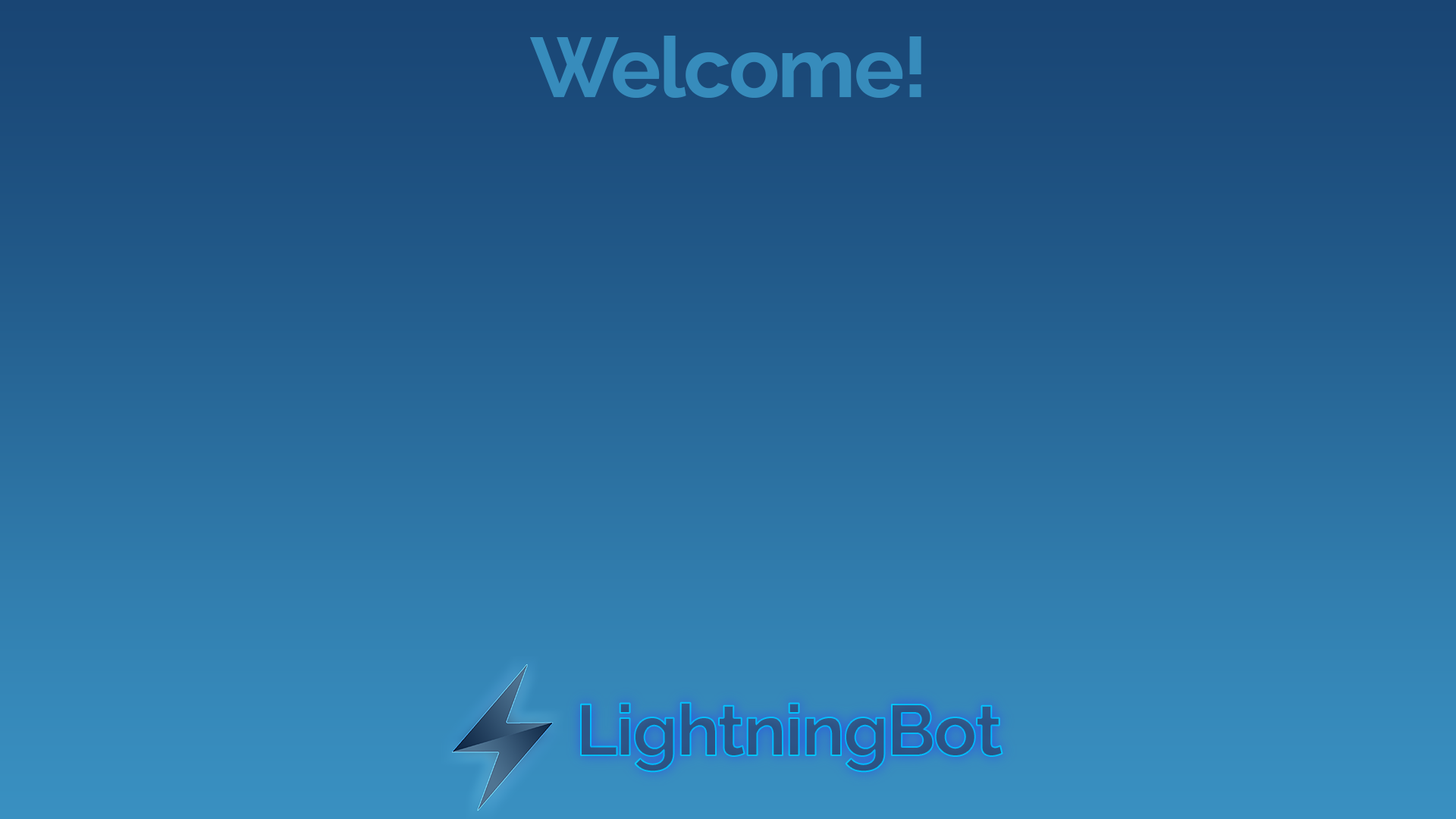
<style>
.page{position:relative;width:1456px;height:819px}
.page>*{position:absolute;margin:0}
.t1{font:84.3px "RalewayRoman-Bold";letter-spacing:-0.025em;color:#378cbc}
.t2{font:71.8px "RalewayRoman-Bold";letter-spacing:-0.025em;color:#2d5587}
</style>
<div class="page">
<p class="t1" style="left:530px;top:36px;width:391px;height:62px">Welcome!</p>
<p class="t2" style="left:581px;top:702px;width:422px;height:70px">LightningBot</p>
</div>
